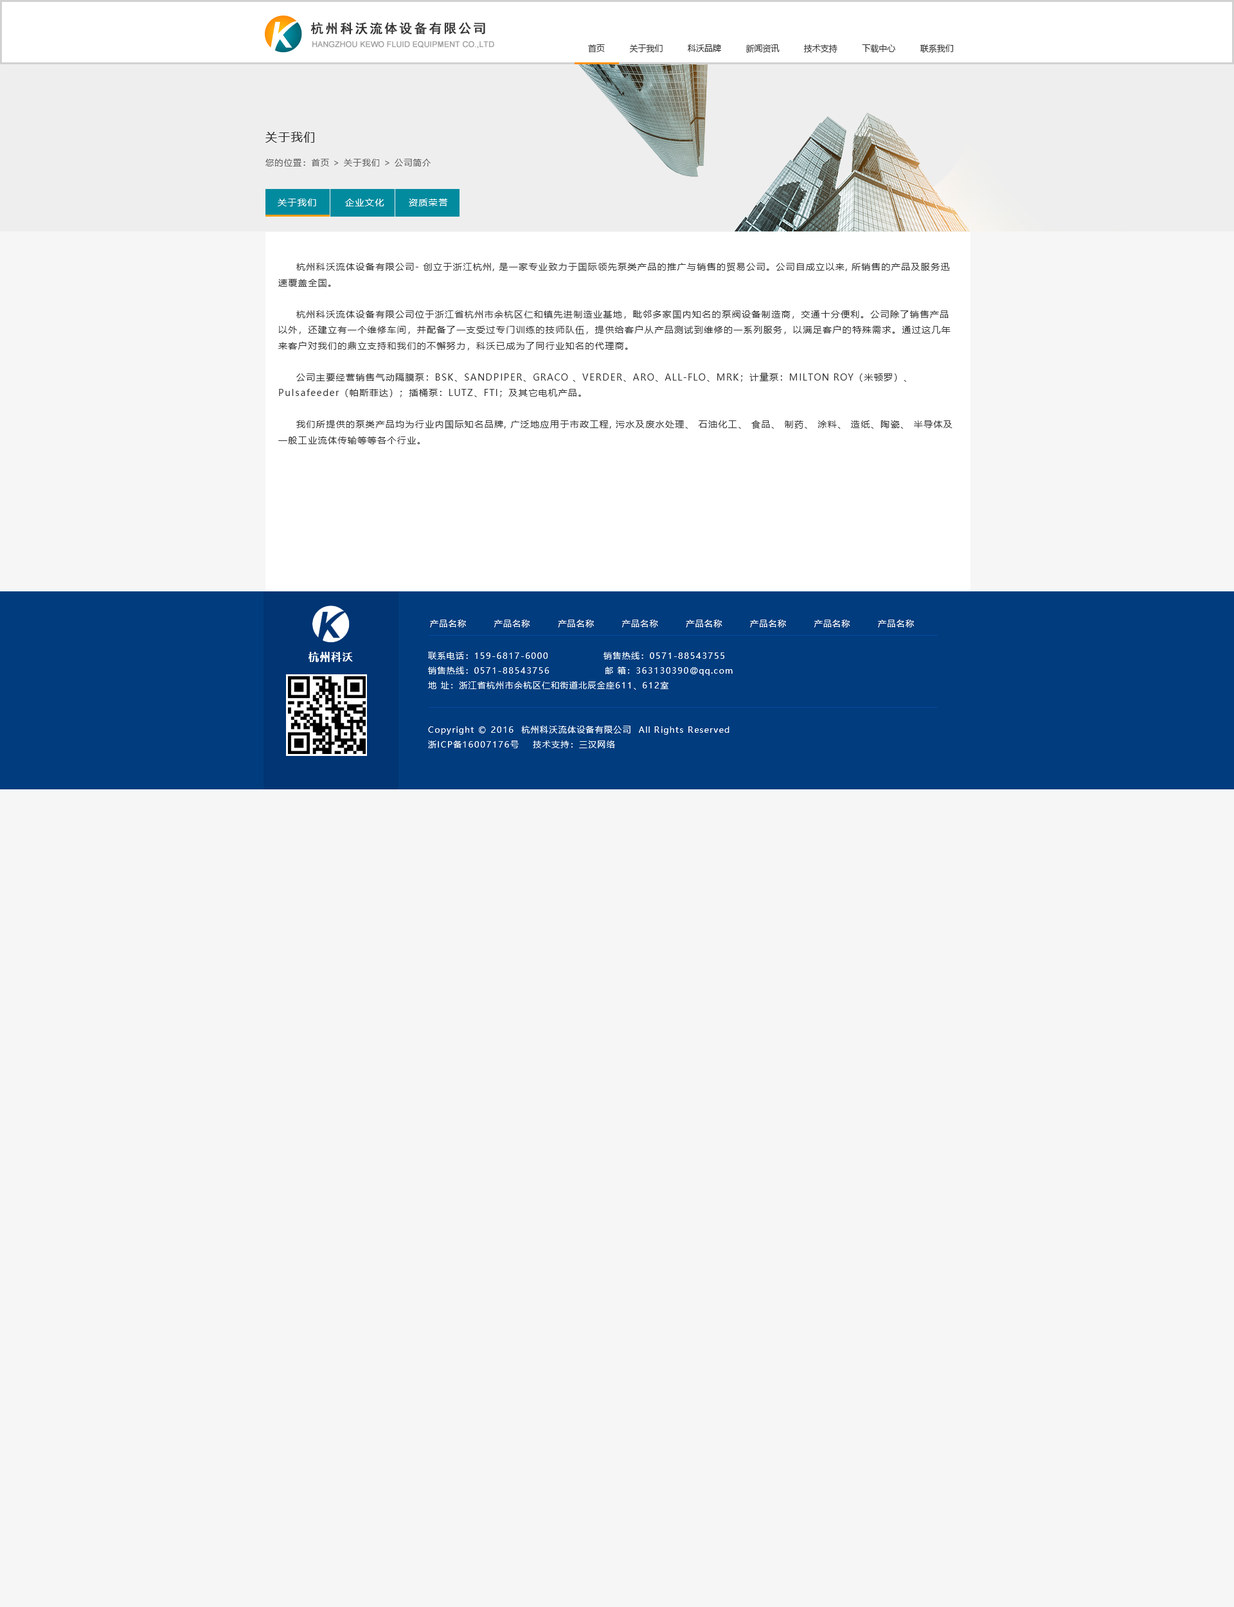
<style>
.page{position:relative;width:1234px;height:1607px;background:#f6f6f6}
.page>*{position:absolute;margin:0}
.t1{font:12.9px "SimHei";letter-spacing:0.1em;color:#333333;font-weight:bold}
.t2{font:7.7px "ArialMT";color:#9f9f9f;font-weight:bold}
.t3{font:8.4px "MicrosoftYaHei";color:#333333}
.t4{font:11.6px "MicrosoftYaHei";letter-spacing:0.1em;color:#323333}
.t5{font:8.4px "MicrosoftYaHei";letter-spacing:0.1em;color:#666666}
.t6{font:9px "MicrosoftYaHei";letter-spacing:0.1em;color:#ffffff}
.t7{font:9px "MicrosoftYaHei";letter-spacing:0.1em;color:#333333}
.t8{font:8.4px "MicrosoftYaHei";letter-spacing:0.1em;color:#ffffff}
.t9{font:10.3px "MicrosoftYaHei-Bold";letter-spacing:0.1em;color:#ffffff}
</style>
<div class="page">
<p class="t1" style="left:310px;top:22px;width:175px;height:13px">杭州科沃流体设备有限公司</p>
<p class="t2" style="left:312px;top:41px;width:182px;height:7px">HANGZHOU KEWO FLUID EQUIPMENT CO.,LTD</p>
<p class="t3" style="left:588px;top:44px;width:365px;height:9px">首页          关于我们          科沃品牌          新闻资讯          技术支持          下载中心          联系我们</p>
<p class="t4" style="left:266px;top:132px;width:48px;height:11px">关于我们</p>
<p class="t5" style="left:266px;top:159px;width:165px;height:7px">您的位置：首页 &gt; 关于我们 &gt; 公司简介</p>
<p class="t6" style="left:278px;top:199px;width:38px;height:7px">关于我们</p>
<p class="t6" style="left:345px;top:199px;width:39px;height:7px">企业文化</p>
<p class="t6" style="left:409px;top:199px;width:38px;height:7px">资质荣誉</p>
<p class="t7" style="left:278px;top:263px;width:675px;height:181px">杭州科沃流体设备有限公司- 创立于浙江杭州, 是一家专业致力于国际领先泵类产品的推广与销售的贸易公司。公司自成立以来, 所销售的产品及服务迅速覆盖全国。<br><br>杭州科沃流体设备有限公司位于浙江省杭州市余杭区仁和镇先进制造业基地，毗邻多家国内知名的泵阀设备制造商，交通十分便利。公司除了销售产品以外，还建立有一个维修车间，并配备了一支受过专门训练的技师队伍，提供给客户从产品测试到维修的一系列服务，以满足客户的特殊需求。通过这几年来客户对我们的鼎立支持和我们的不懈努力，科沃已成为了同行业知名的代理商。<br><br>公司主要经营销售气动隔膜泵：BSK、SANDPIPER、GRACO 、VERDER、ARO、ALL-FLO、MRK；计量泵：MILTON ROY（米顿罗）、Pulsafeeder（帕斯菲达）；插桶泵：LUTZ、FTI；及其它电机产品。<br><br>我们所提供的泵类产品均为行业内国际知名品牌, 广泛地应用于市政工程, 污水及废水处理、 石油化工、 食品、 制药、 涂料、 造纸、陶瓷、 半导体及一般工业流体传输等等各个行业。</p>
<p class="t8" style="left:430px;top:620px;width:484px;height:7px">产品名称        产品名称        产品名称        产品名称        产品名称        产品名称        产品名称        产品名称</p>
<p class="t9" style="left:309px;top:652px;width:44px;height:10px">杭州科沃</p>
<p class="t8" style="left:428px;top:652px;width:305px;height:38px">联系电话：159-6817-6000                销售热线：0571-88543755<br>销售热线：0571-88543756                邮 箱：363130390@qq.com<br>地 址：浙江省杭州市余杭区仁和街道北辰金座611、612室</p>
<p class="t8" style="left:428px;top:726px;width:302px;height:22px">Copyright © 2016  杭州科沃流体设备有限公司  All Rights Reserved    <br>浙ICP备16007176号    技术支持：三汉网络</p>
</div>
